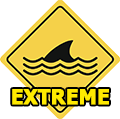
<style>
.page{position:relative;width:120px;height:119px;background:#ffffff}
.page>*{position:absolute;margin:0}
.t1{font:20px "Tahoma-Bold";color:#ffea00;font-weight:bold}
</style>
<div class="page">
<p class="t1" style="left:12px;top:89px;width:97px;height:16px">EXTREME</p>
</div>
